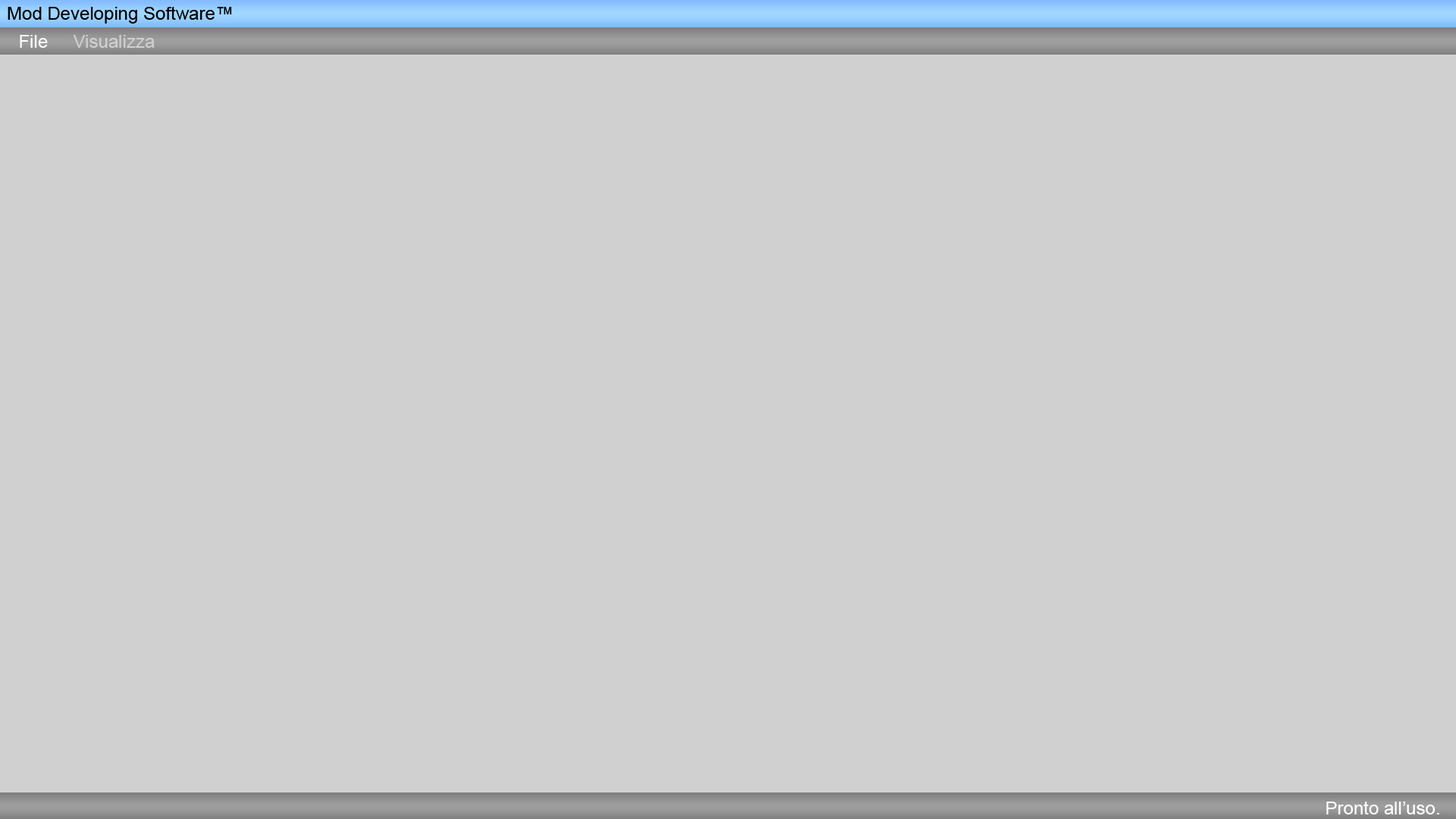
<style>
.page{position:relative;width:1456px;height:819px;background:#d0d0d0}
.page>*{position:absolute;margin:0}
.t1{font:18.2px "ArialMT";color:#000000}
.t2{font:18.2px "ArialMT";color:#d0d0d0}
.t3{font:18.2px "ArialMT";color:#ffffff}
</style>
<div class="page">
<p class="t1" style="left:8px;top:6px;width:224px;height:18px">Mod Developing Software™</p>
<p class="t2" style="left:20px;top:35px;width:135px;height:13px"><span class="t3">File </span>Visualizza</p>
<p class="t3" style="left:1326px;top:801px;width:113px;height:13px">Pronto all’uso.</p>
</div>
